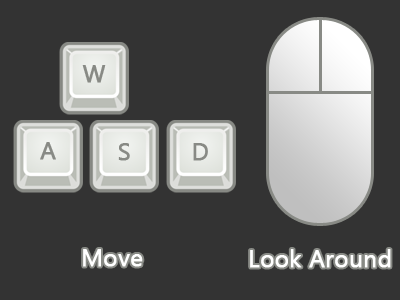
<style>
.page{position:relative;width:400px;height:300px;background:#333333}
.page>*{position:absolute;margin:0}
.t1{font:24px "SegoeUI";color:#888a85;font-weight:bold}
.t2{font:24px "SegoeUI";color:#ffffff;font-weight:bold}
</style>
<div class="page">
<p class="t1" style="left:82px;top:65px;width:24px;height:18px">W</p>
<p class="t1" style="left:40px;top:142px;width:16px;height:18px">A</p>
<p class="t1" style="left:118px;top:143px;width:12px;height:18px">S</p>
<p class="t1" style="left:193px;top:143px;width:15px;height:18px">D</p>
<p class="t2" style="left:83px;top:249px;width:60px;height:18px">Move</p>
<p class="t2" style="left:250px;top:249px;width:141px;height:19px">Look Around</p>
</div>
